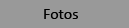
<style>
.page{position:relative;width:129px;height:28px;background:#999999}
.page>*{position:absolute;margin:0}
.t1{font:16px "Calibri";color:#000000}
</style>
<div class="page">
<p class="t1" style="left:44px;top:9px;width:34px;height:10px">Fotos</p>
</div>
